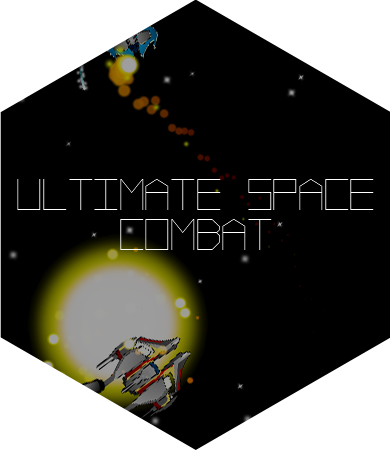
<style>
.page{position:relative;width:390px;height:450px;background:#000000}
.page>*{position:absolute;margin:0}
.t1{font:33.3px "VectorBattle";color:#ffffff}
</style>
<div class="page">
<p class="t1" style="left:17px;top:179px;width:357px;height:71px;text-align:center">ULTIMATE SPACE<br>COMBAT</p>
</div>
